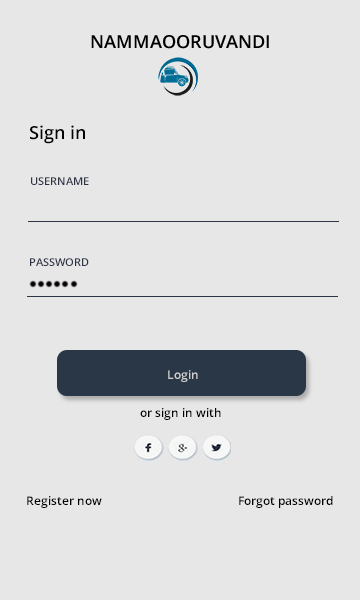
<style>
.page{position:relative;width:360px;height:600px;background:#e7e7e7}
.page>*{position:absolute;margin:0}
.t1{font:18px "OpenSans-Semibold";color:#020000}
.t2{font:11px "OpenSans-Semibold";color:#2c3445}
.t3{font:12px "OpenSans-Semibold";color:#e7e7e7}
.t4{font:12px "OpenSans-Semibold";color:#020000}
.t5{font:12px "OpenSans-Semibold";color:#030101}
</style>
<div class="page">
<p class="t1" style="left:30px;top:125px;width:55px;height:19px">Sign in</p>
<p class="t2" style="left:31px;top:177px;width:58px;height:8px">USERNAME</p>
<p class="t2" style="left:30px;top:258px;width:59px;height:8px">PASSWORD</p>
<p class="t3" style="left:168px;top:370px;width:30px;height:12px;opacity:0.7">Login</p>
<p class="t4" style="left:140px;top:408px;width:81px;height:12px">or sign in with</p>
<p class="t5" style="left:27px;top:496px;width:75px;height:12px">Register now</p>
<p class="t4" style="left:239px;top:496px;width:94px;height:12px">Forgot password</p>
</div>
